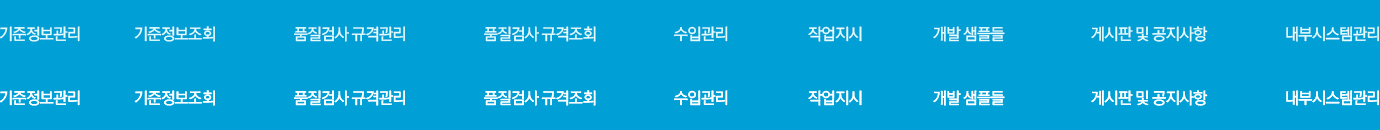
<style>
.page{position:relative;width:1380px;height:130px;background:#009fd6}
.page>*{position:absolute;margin:0}
.t1{font:16px "RixMGoM";letter-spacing:-0.05em;color:#e5fffe}
</style>
<div class="page">
<p class="t1" style="left:0px;top:26px;width:80px;height:16px">기준정보관리</p>
<p class="t1" style="left:134px;top:26px;width:81px;height:16px">기준정보조회</p>
<p class="t1" style="left:294px;top:26px;width:111px;height:16px">품질검사 규격관리</p>
<p class="t1" style="left:484px;top:26px;width:112px;height:16px">품질검사 규격조회</p>
<p class="t1" style="left:674px;top:26px;width:54px;height:16px">수입관리</p>
<p class="t1" style="left:808px;top:26px;width:54px;height:16px">작업지시</p>
<p class="t1" style="left:933px;top:26px;width:72px;height:16px">개발 샘플들</p>
<p class="t1" style="left:1091px;top:26px;width:117px;height:16px">게시판 및 공지사항</p>
<p class="t1" style="left:1286px;top:26px;width:93px;height:16px">내부시스템관리</p>
</div>
